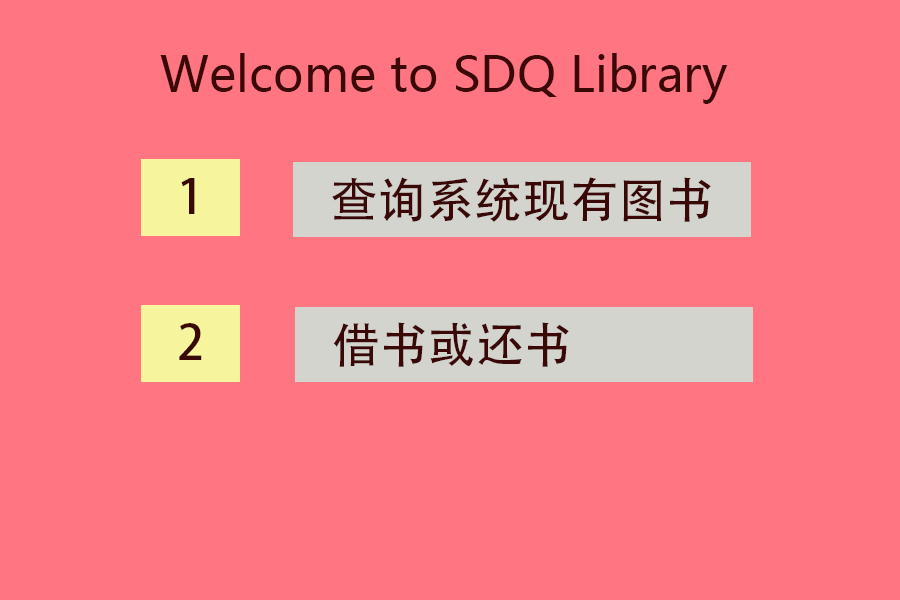
<style>
.page{position:relative;width:900px;height:600px;background:#ff7582}
.page>*{position:absolute;margin:0}
.t1{font:48px "MicrosoftYaHeiUI";color:#3b0808}
.t2{font:48px "AdobeHeitiStd-Regular";color:#3b0808}
</style>
<div class="page">
<p class="t1" style="left:160px;top:53px;width:568px;height:51px">Welcome to SDQ Library</p>
<p class="t2" style="left:181px;top:178px;width:14px;height:36px">1</p>
<p class="t2" style="left:332px;top:177px;width:379px;height:45px">查询系统现有图书</p>
<p class="t2" style="left:179px;top:323px;width:23px;height:37px">2</p>
<p class="t2" style="left:333px;top:322px;width:236px;height:45px">借书或还书</p>
</div>
